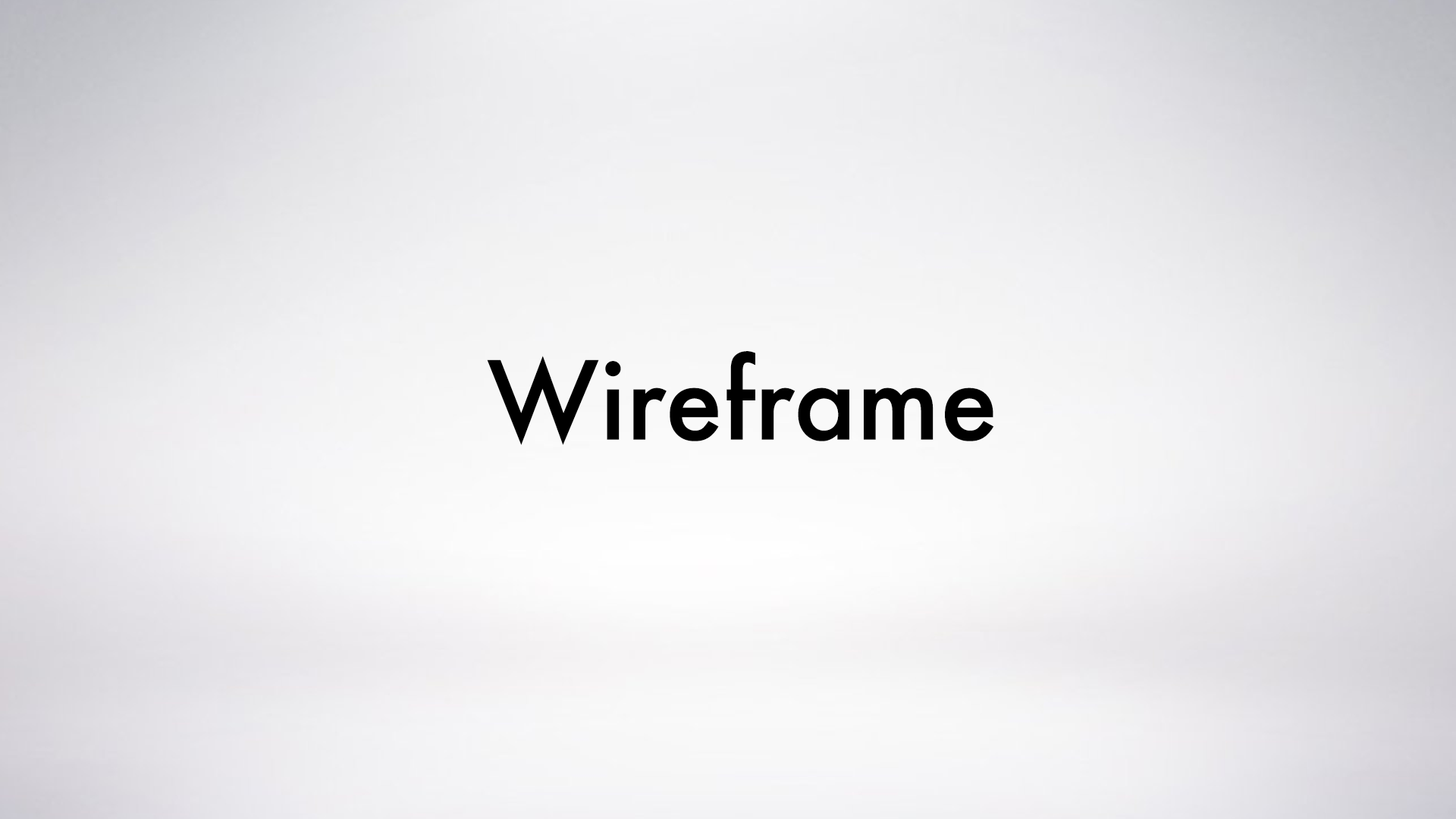
<style>
.page{position:relative;width:1456px;height:819px}
.page>*{position:absolute;margin:0}
.t1{font:105.5px "Futura-Medium";color:#000000}
</style>
<div class="page">
<p class="t1" style="left:487px;top:351px;width:507px;height:94px">Wireframe</p>
</div>
